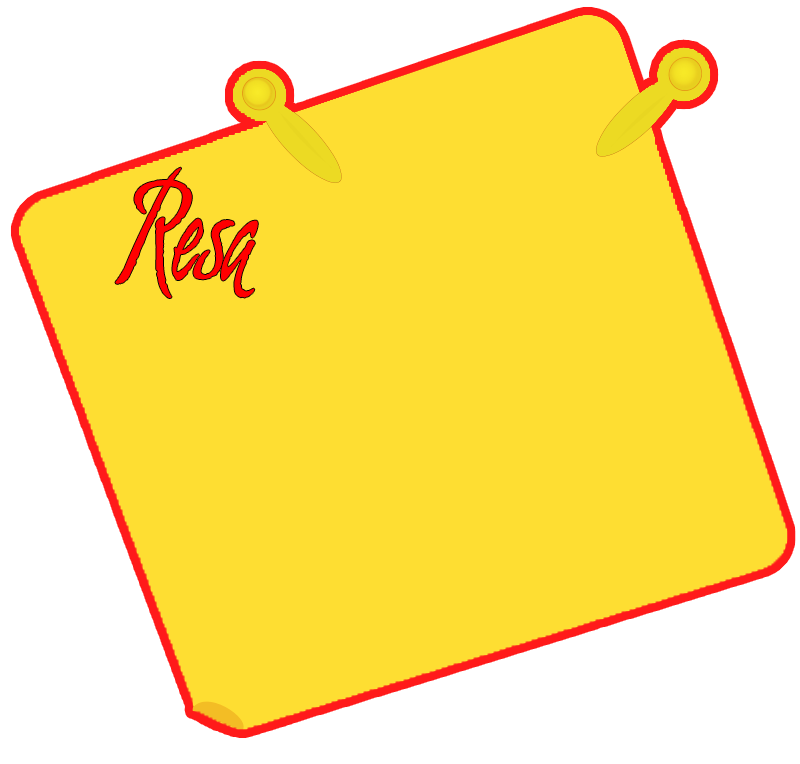
<style>
.page{position:relative;width:800px;height:764px;background:#fede32}
.page>*{position:absolute;margin:0}
.t1{font:120.6px "AlmondScript";color:#ff0000;scale:0.65 1}
</style>
<div class="page">
<p class="t1" style="left:115px;top:167px;width:143px;height:131px;rotate:1deg">Resa</p>
</div>
